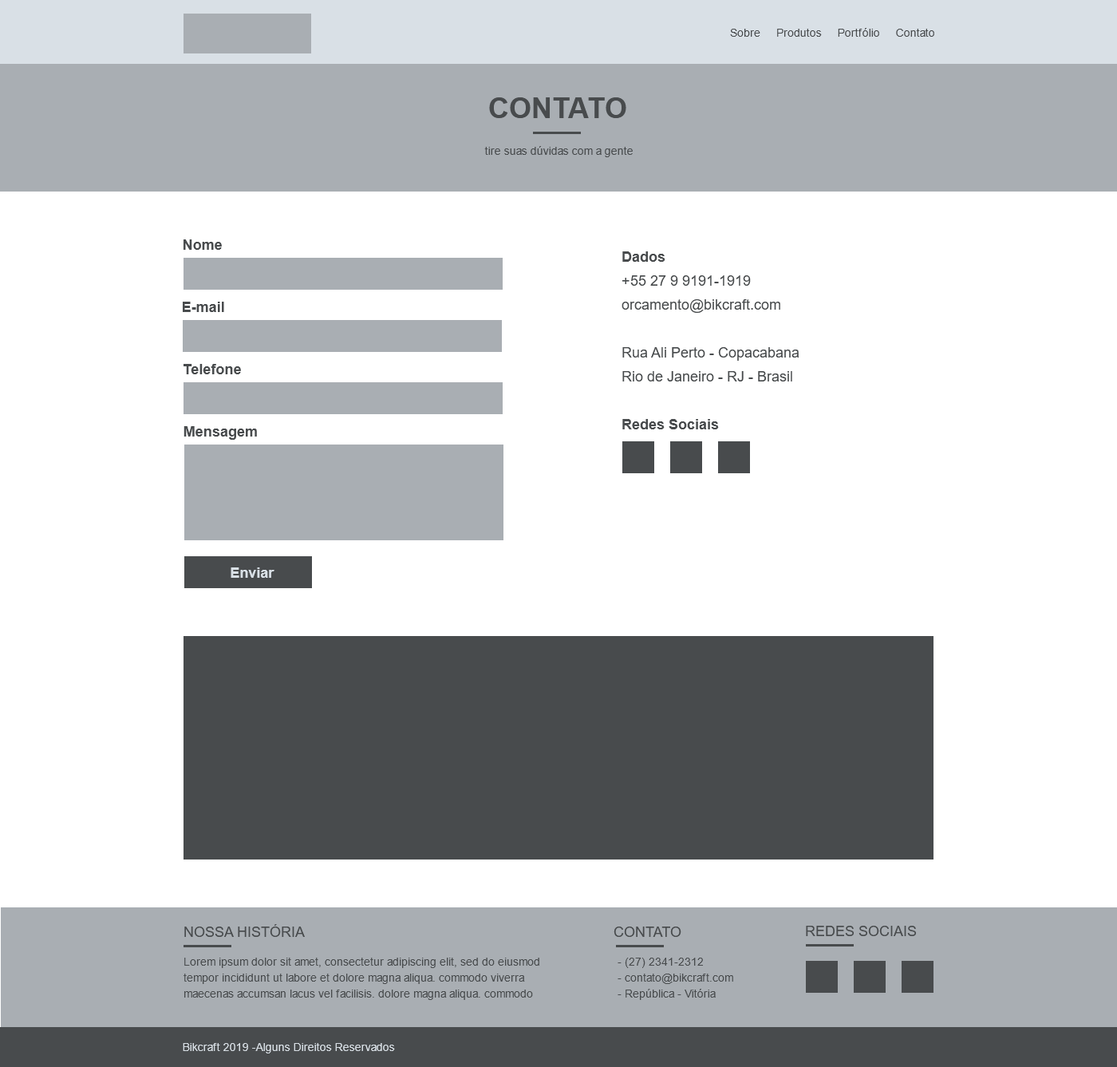
<style>
.page{position:relative;width:1117px;height:1067px;background:#ffffff}
.page>*{position:absolute;margin:0}
.t1{font:11.2px "ArialMT";color:#484b4d}
.t2{font:28.7px "Arial-BoldMT";color:#484b4d;text-transform:uppercase}
.t3{font:14.4px "Arial-BoldMT";color:#484b4d}
.t4{font:14.4px/23.9px "ArialMT";color:#484b4d}
.t5{font:14.4px/23.9px "Arial-BoldMT";color:#484b4d}
.t6{font:14.4px "Arial-BoldMT";color:#d9e0e6}
.t7{font:14.4px "ArialMT";color:#484b4d;text-transform:uppercase}
.t8{font:11.2px/16px "ArialMT";color:#484b4d}
.t9{font:11.2px "ArialMT";color:#d9e0e6}
</style>
<div class="page">
<p class="t1" style="left:730px;top:28px;width:205px;height:9px">Sobre     Produtos     Portfólio     Contato</p>
<p class="t2" style="left:489px;top:97px;width:138px;height:21px">contato</p>
<p class="t1" style="left:484px;top:146px;width:149px;height:11px">tire suas dúvidas com a gente</p>
<p class="t3" style="left:184px;top:239px;width:38px;height:11px">Nome</p>
<p class="t4" style="left:622px;top:251px;width:178px;height:178px"><span class="t5">Dados<br></span>+55 27 9 9191-1919<br>orcamento@bikcraft.com<br><br>Rua Ali Perto - Copacabana<br>Rio de Janeiro - RJ - Brasil<br><span class="t5"><br>Redes Sociais</span></p>
<p class="t3" style="left:183px;top:302px;width:41px;height:10px">E-mail</p>
<p class="t3" style="left:184px;top:364px;width:57px;height:10px">Telefone</p>
<p class="t3" style="left:184px;top:426px;width:73px;height:14px">Mensagem</p>
<p class="t6" style="left:231px;top:567px;width:44px;height:11px">Enviar</p>
<p class="t7" style="left:184px;top:924px;width:121px;height:13px">Nossa História</p>
<p class="t7" style="left:614px;top:927px;width:68px;height:10px">contato</p>
<p class="t7" style="left:806px;top:926px;width:110px;height:10px">redes sociais</p>
<p class="t8" style="left:184px;top:958px;width:356px;height:42px">Lorem ipsum dolor sit amet, consectetur adipiscing elit, sed do eiusmod tempor incididunt ut labore et dolore magna aliqua. commodo viverra maecenas accumsan lacus vel facilisis. dolore magna aliqua. commodo</p>
<p class="t8" style="left:618px;top:958px;width:116px;height:42px">- (27) 2341-2312<br> - contato@bikcraft.com<br> - República - Vitória</p>
<p class="t9" style="left:183px;top:1043px;width:212px;height:11px">Bikcraft 2019 -Alguns Direitos Reservados</p>
</div>
